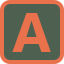
<style>
.page{position:relative;width:64px;height:64px;background:#4e6151}
.page>*{position:absolute;margin:0}
.t1{font:55.8px "SegoeUIVariable-BoldDisplay";color:#e9724c}
</style>
<div class="page">
<p class="t1" style="left:12px;top:13px;width:39px;height:39px">A</p>
</div>
